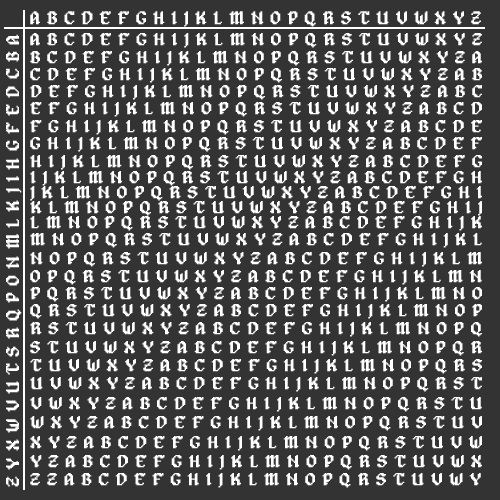
<style>
.page{position:relative;width:500px;height:500px;background:#333333}
.page>*{position:absolute;margin:0}
.t1{font:18.4px "Alagard";color:#ffffff;font-weight:bold}
.t2{font:17.4px "Alagard";color:#ffffff;font-weight:bold;scale:1.06 1}
</style>
<div class="page">
<p class="t1" style="left:30px;top:11px;width:451px;height:16px">A B C D E F G H I J K L M N O P Q R S T U V W X Y Z</p>
<p class="t1" style="left:6px;top:34px;width:16px;height:453px;rotate:180deg">Z Y X W V U T S R Q P O N M L K J I H G F E D C B A</p>
<p class="t2" style="left:30px;top:33px;width:452px;height:15px">A B C D E F G H I J K L M N O P Q R S T U V W X Y Z</p>
<p class="t2" style="left:30px;top:51px;width:452px;height:15px">B C D E F G H I J K L M N O P Q R S T U V W X Y Z A</p>
<p class="t2" style="left:30px;top:68px;width:452px;height:15px">C D E F G H I J K L M N O P Q R S T U V W X Y Z A B</p>
<p class="t2" style="left:30px;top:85px;width:452px;height:15px">D E F G H I J K L M N O P Q R S T U V W X Y Z A B C</p>
<p class="t2" style="left:30px;top:102px;width:452px;height:15px">E F G H I J K L M N O P Q R S T U V W X Y Z A B C D</p>
<p class="t2" style="left:30px;top:120px;width:452px;height:15px">F G H I J K L M N O P Q R S T U V W X Y Z A B C D E</p>
<p class="t2" style="left:30px;top:137px;width:452px;height:15px">G H I J K L M N O P Q R S T U V W X Y Z A B C D E F</p>
<p class="t2" style="left:30px;top:155px;width:452px;height:15px">H I J K L M N O P Q R S T U V W X Y Z A B C D E F G</p>
<p class="t2" style="left:30px;top:171px;width:452px;height:15px">I J K L M N O P Q R S T U V W X Y Z A B C D E F G H</p>
<p class="t2" style="left:30px;top:186px;width:452px;height:15px">J K L M N O P Q R S T U V W X Y Z A B C D E F G H I</p>
<p class="t2" style="left:30px;top:201px;width:452px;height:15px">K L M N O P Q R S T U V W X Y Z A B C D E F G H I J</p>
<p class="t2" style="left:30px;top:216px;width:452px;height:15px">L M N O P Q R S T U V W X Y Z A B C D E F G H I J K</p>
<p class="t2" style="left:30px;top:233px;width:452px;height:15px">M N O P Q R S T U V W X Y Z A B C D E F G H I J K L</p>
<p class="t2" style="left:30px;top:252px;width:452px;height:15px">N O P Q R S T U V W X Y Z A B C D E F G H I J K L M</p>
<p class="t2" style="left:30px;top:270px;width:452px;height:15px">O P Q R S T U V W X Y Z A B C D E F G H I J K L M N</p>
<p class="t2" style="left:30px;top:287px;width:452px;height:15px">P Q R S T U V W X Y Z A B C D E F G H I J K L M N O</p>
<p class="t2" style="left:30px;top:304px;width:452px;height:15px">Q R S T U V W X Y Z A B C D E F G H I J K L M N O P</p>
<p class="t2" style="left:30px;top:322px;width:452px;height:15px">R S T U V W X Y Z A B C D E F G H I J K L M N O P Q</p>
<p class="t2" style="left:30px;top:341px;width:452px;height:15px">S T U V W X Y Z A B C D E F G H I J K L M N O P Q R</p>
<p class="t2" style="left:30px;top:359px;width:452px;height:15px">T U V W X Y Z A B C D E F G H I J K L M N O P Q R S</p>
<p class="t2" style="left:30px;top:377px;width:452px;height:15px">U V W X Y Z A B C D E F G H I J K L M N O P Q R S T</p>
<p class="t2" style="left:30px;top:397px;width:452px;height:15px">V W X Y Z A B C D E F G H I J K L M N O P Q R S T U</p>
<p class="t2" style="left:30px;top:416px;width:452px;height:15px">W X Y Z A B C D E F G H I J K L M N O P Q R S T U V</p>
<p class="t2" style="left:30px;top:436px;width:452px;height:15px">X Y Z A B C D E F G H I J K L M N O P Q R S T U V W</p>
<p class="t2" style="left:30px;top:455px;width:452px;height:15px">Y Z A B C D E F G H I J K L M N O P Q R S T U V W X</p>
<p class="t2" style="left:30px;top:473px;width:451px;height:15px">Z Z A B C D E F G H I J K L M N O P Q R S T U V W Y</p>
</div>
